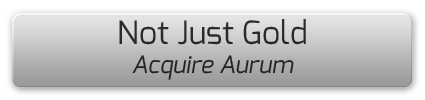
<style>
.page{position:relative;width:425px;height:100px}
.page>*{position:absolute;margin:0}
.t1{font:32px "Exo-Regular";color:#292929}
.t2{font:24px "Exo-Italic";color:#292929}
</style>
<div class="page">
<p class="t1" style="left:119px;top:19px;width:187px;height:61px;text-align:center">Not Just Gold<br><span class="t2">Acquire Aurum</span></p>
</div>
